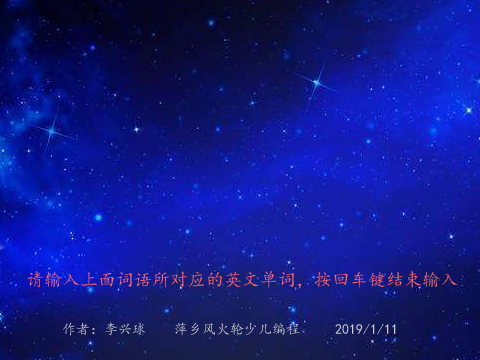
<style>
.page{position:relative;width:480px;height:360px}
.page>*{position:absolute;margin:0}
.t1{font:14px/48px "¿¬Ìå-Regular";color:#cccccc}
.t2{font:18px/48px "¿¬Ìå-Regular";color:#ff6666}
</style>
<div class="page">
<p class="t1" style="left:27px;top:271px;width:431px;height:65px"><span class="t2">请输入上面词语所对应的英文单词，按回车键结束输入<br>    </span>作者：李兴球    萍乡风火轮少儿编程     2019/1/11</p>
</div>
